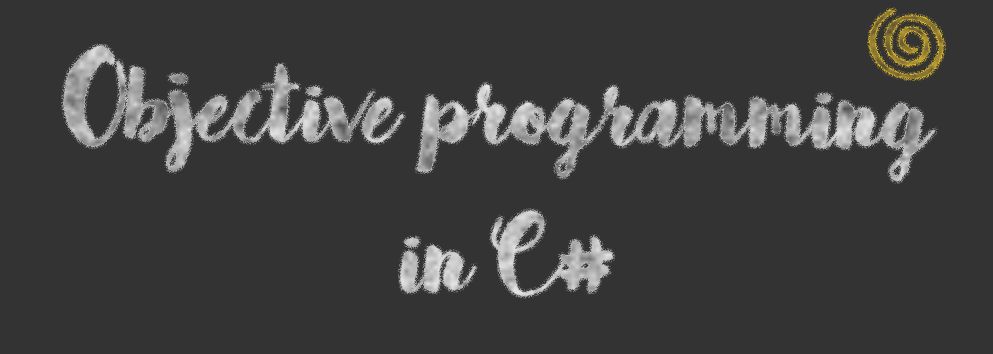
<style>
.page{position:relative;width:993px;height:354px;background:#333333}
.page>*{position:absolute;margin:0}
.t1{font:125px "Bakery"}
</style>
<div class="page">
<p class="t1" style="left:63px;top:46px;width:873px;height:250px;rotate:1deg">Objective programming<br>              in C#</p>
</div>
